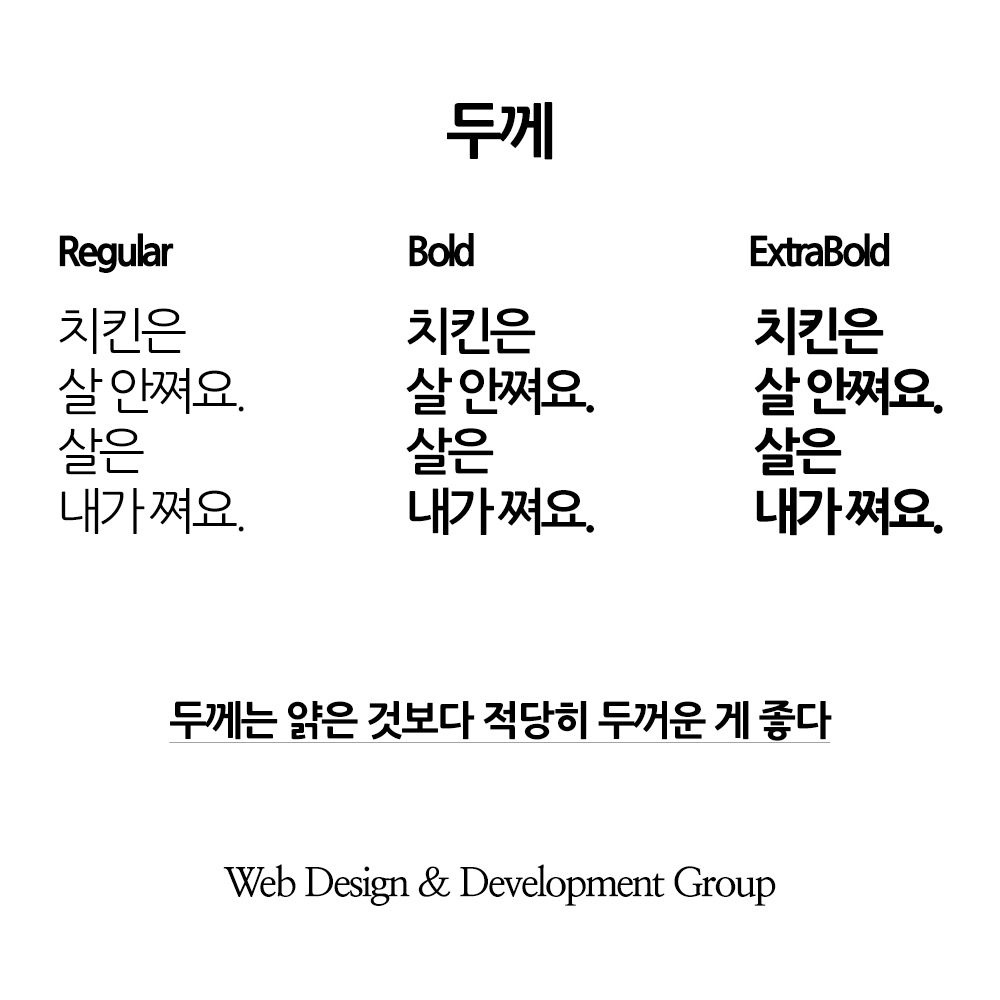
<style>
.page{position:relative;width:1000px;height:1000px;background:#ffffff}
.page>*{position:absolute;margin:0}
.t1{font:60px "NanumGothicExtraBold";letter-spacing:-0.05em;color:#000000}
.t2{font:40px "NanumGothicExtraBold";letter-spacing:-0.1em;color:#000000}
.t3{font:50px/60px "NanumGothic";letter-spacing:-0.1em;color:#000000}
.t4{font:50px/60px "NanumGothicBold";letter-spacing:-0.1em;color:#000000}
.t5{font:50px/60px "NanumGothicExtraBold";letter-spacing:-0.1em;color:#000000}
.t6{font:40px "NanumGothicExtraBold";letter-spacing:-0.05em;color:#000000;text-decoration:underline}
.t7{font:40px "NanumMyeongjoBold";letter-spacing:-0.06em;color:#000000}
</style>
<div class="page">
<p class="t1" style="left:447px;top:102px;width:106px;height:58px">두께</p>
<p class="t2" style="left:59px;top:233px;width:115px;height:40px">Regular</p>
<p class="t2" style="left:409px;top:233px;width:65px;height:34px">Bold</p>
<p class="t2" style="left:750px;top:233px;width:140px;height:34px">ExtraBold</p>
<p class="t3" style="left:59px;top:308px;width:185px;height:226px">치킨은<br>살 안쪄요.<br>살은<br>내가 쪄요.</p>
<p class="t4" style="left:406px;top:307px;width:188px;height:228px">치킨은<br>살 안쪄요.<br>살은<br>내가 쪄요.</p>
<p class="t5" style="left:754px;top:307px;width:189px;height:229px">치킨은<br>살 안쪄요.<br>살은<br>내가 쪄요.</p>
<p class="t6" style="left:169px;top:700px;width:663px;height:43px">두께는 얅은 것보다 적당히 두꺼운 게 좋다</p>
<p class="t7" style="left:223px;top:864px;width:553px;height:42px">Web Design &amp; Development Group</p>
</div>
